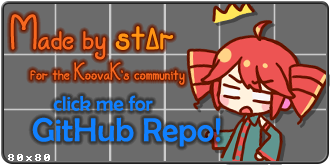
<style>
.page{position:relative;width:330px;height:165px;background:#6b6b6b}
.page>*{position:absolute;margin:0}
.t1{font:50px "Clausly";color:#f76820}
.t2{font:62.5px "Clausly";color:#ff9514}
.t3{font:25px "Clausly";color:#f76820}
.t4{font:20.8px "BerlinSansFB-Reg";color:#1080ff}
.t5{font:33.3px "BerlinSansFB-Reg";color:#1080ff}
.t6{font:12.5px "8bitOperatorPlus8-Bold";color:#ffffff}
</style>
<div class="page">
<p class="t1" style="left:10px;top:14px;width:164px;height:46px">Made by <span class="t2">stΔr</span></p>
<p class="t3" style="left:30px;top:62px;width:155px;height:23px">for the KoovaK’s community</p>
<p class="t4" style="left:53px;top:95px;width:100px;height:16px">click me for</p>
<p class="t5" style="left:32px;top:117px;width:189px;height:30px">GitHub Repo!</p>
<p class="t6" style="left:8px;top:154px;width:42px;height:7px">80x80</p>
</div>
